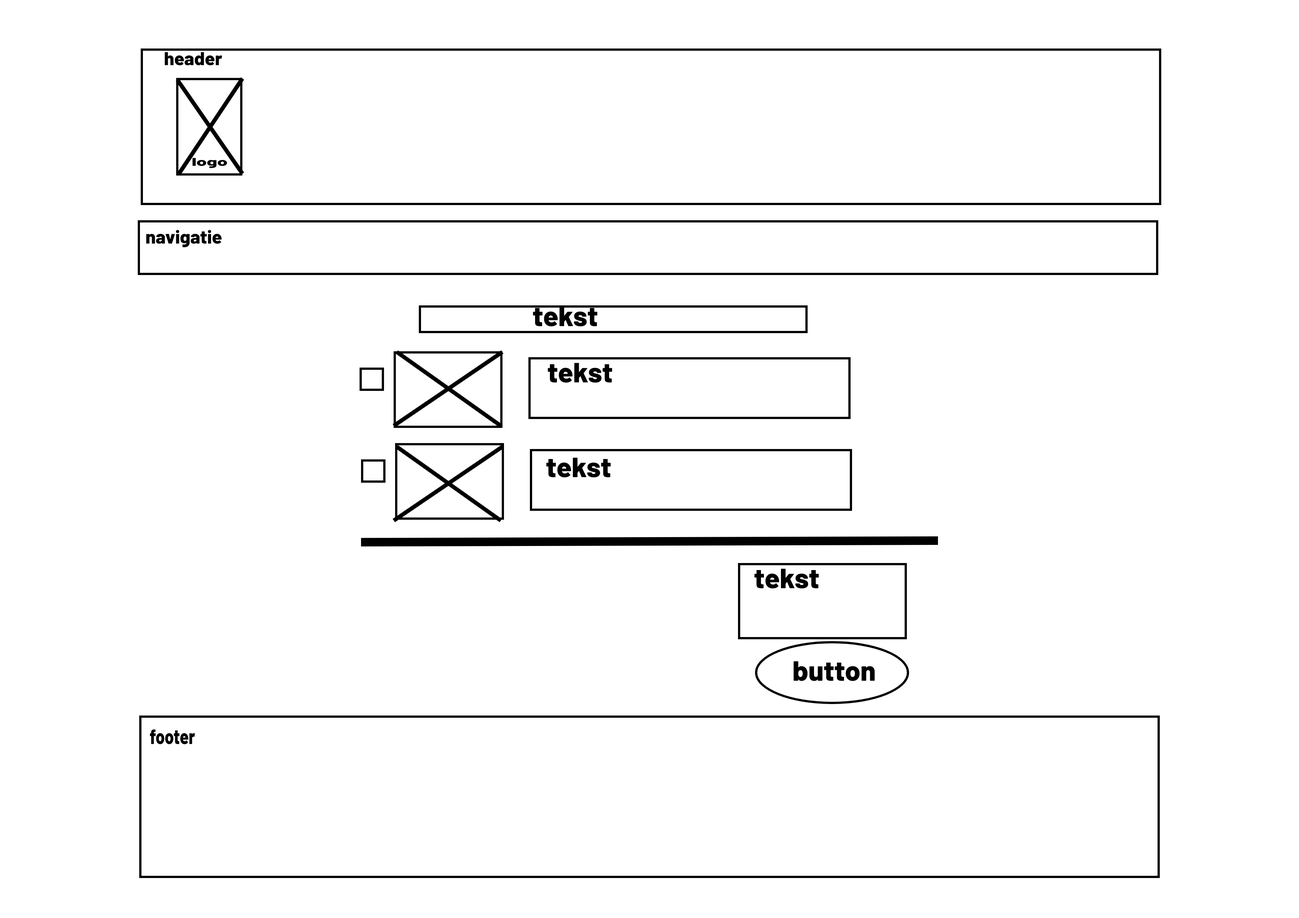
<style>
.page{position:relative;width:1299px;height:918px;background:#ffffff}
.page>*{position:absolute;margin:0}
.t1{font:18.5px "Barlow-ExtraBold";color:#000000}
.t2{font:11.2px "Barlow-ExtraBold";color:#000000;scale:1.66 1}
.t3{font:27.8px "Barlow-ExtraBold";color:#000000}
.t4{font:20.7px "Barlow-ExtraBold";color:#000000;scale:0.78 1}
</style>
<div class="page">
<p class="t1" style="left:165px;top:52px;width:57px;height:14px">header</p>
<p class="t2" style="left:193px;top:158px;width:34px;height:10px">logo</p>
<p class="t1" style="left:146px;top:230px;width:76px;height:17px">navigatie</p>
<p class="t3" style="left:533px;top:307px;width:65px;height:20px">tekst</p>
<p class="t3" style="left:548px;top:363px;width:64px;height:20px">tekst</p>
<p class="t3" style="left:546px;top:458px;width:65px;height:20px">tekst</p>
<p class="t3" style="left:754px;top:569px;width:65px;height:20px">tekst</p>
<p class="t3" style="left:793px;top:661px;width:81px;height:20px">button</p>
<p class="t4" style="left:150px;top:729px;width:45px;height:16px">footer</p>
</div>
